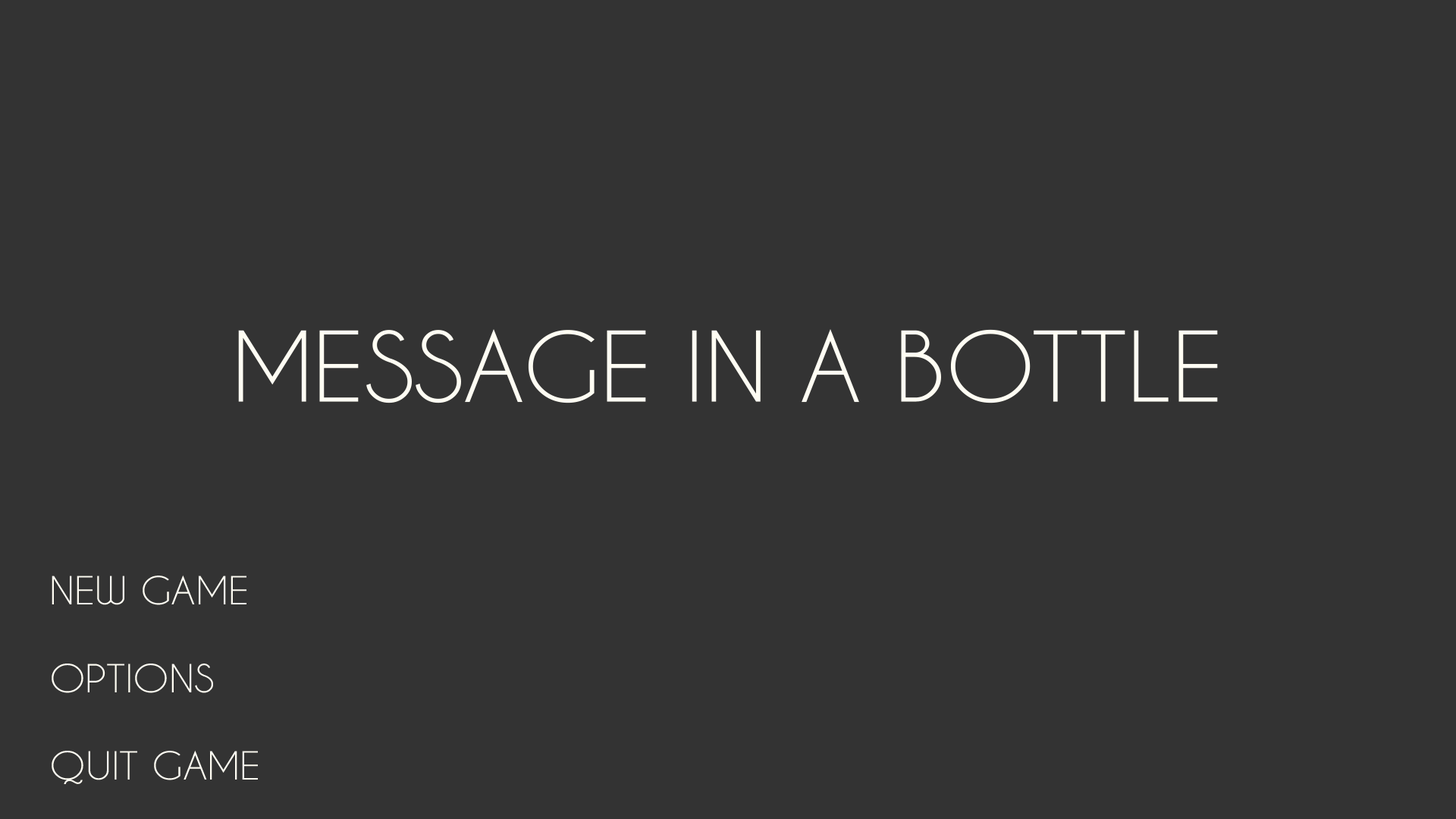
<style>
.page{position:relative;width:1456px;height:819px;background:#333333}
.page>*{position:absolute;margin:0}
.t1{font:91px "CaviarDreams";letter-spacing:-0.005em;color:#fffdf3;scale:1.08 1}
.t2{font:36.4px "CaviarDreams";letter-spacing:-0.005em;color:#fffdf3;scale:1.08 1}
</style>
<div class="page">
<p class="t1" style="left:238px;top:329px;width:980px;height:74px">MESSAGE IN A BOTTLE</p>
<p class="t2" style="left:52px;top:575px;width:194px;height:30px">NEW GAME</p>
<p class="t2" style="left:52px;top:664px;width:161px;height:29px">OPTIONS</p>
<p class="t2" style="left:52px;top:750px;width:206px;height:34px">QUIT GAME</p>
</div>
